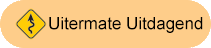
<style>
.page{position:relative;width:211px;height:48px;background:#fecd8a}
.page>*{position:absolute;margin:0}
.t1{font:16.9px "ArialMT";color:#000000}
</style>
<div class="page">
<p class="t1" style="left:49px;top:17px;width:154px;height:16px">Uitermate Uitdagend</p>
</div>
